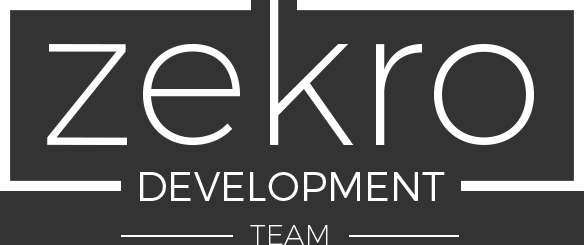
<style>
.page{position:relative;width:584px;height:245px;background:#333333}
.page>*{position:absolute;margin:0}
.t1{font:194.8px "Montserrat-UltraLight";color:#ffffff}
.t2{font:40.2px "Montserrat-Light";color:#ffffff}
.t3{font:28.7px "Montserrat-UltraLight";color:#ffffff}
</style>
<div class="page">
<p class="t1" style="left:47px;top:0px;width:487px;height:146px">zekro</p>
<p class="t2" style="left:140px;top:172px;width:305px;height:29px">DEVELOPMENT</p>
<p class="t3" style="left:250px;top:225px;width:78px;height:20px">TEAM</p>
</div>
